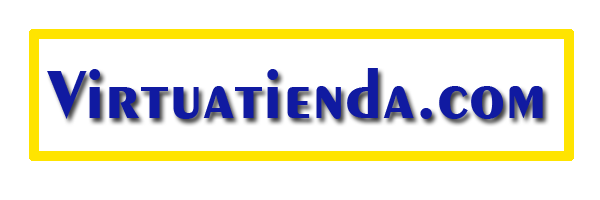
<style>
.page{position:relative;width:600px;height:200px;background:#ffffff}
.page>*{position:absolute;margin:0}
.t1{font:72px "Exotic350BT-Bold";color:#101aa1}
</style>
<div class="page">
<p class="t1" style="left:47px;top:68px;width:496px;height:51px">Virtuatienda.com</p>
</div>
